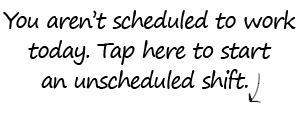
<style>
.page{position:relative;width:303px;height:115px;background:#ffffff}
.page>*{position:absolute;margin:0}
.t1{font:22px/30px "SegoePrint";letter-spacing:-0.055em;color:#000000}
</style>
<div class="page">
<p class="t1" style="left:3px;top:10px;width:293px;height:79px;text-align:center">You aren’t scheduled to work<br>today. Tap here to start<br>an unscheduled shift.</p>
</div>
